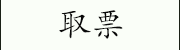
<style>
.page{position:relative;width:180px;height:50px;background:#fafef8}
.page>*{position:absolute;margin:0}
.t1{font:33.3px "STKaiti";color:#090909}
</style>
<div class="page">
<p class="t1" style="left:59px;top:10px;width:64px;height:29px">取票</p>
</div>
